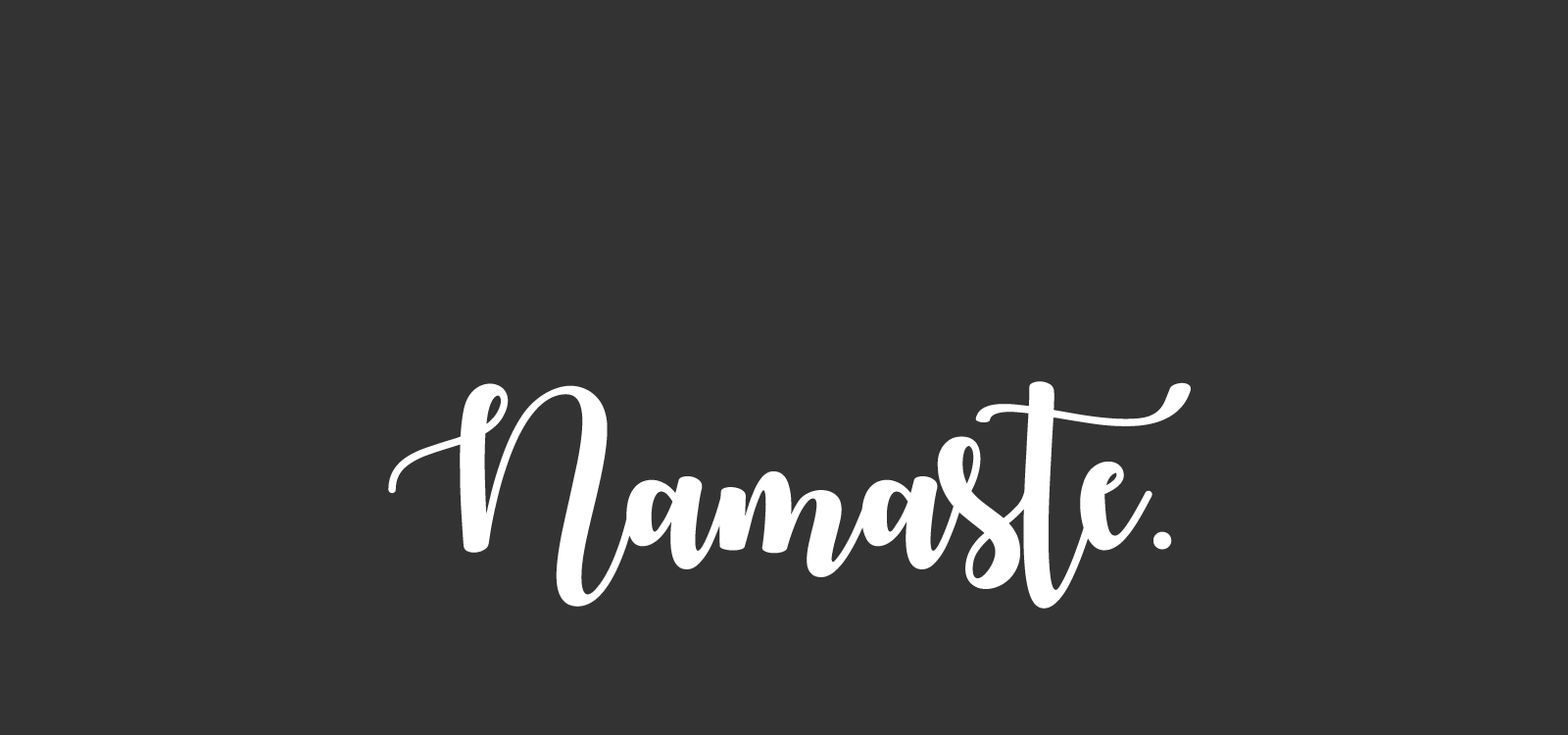
<style>
.page{position:relative;width:1568px;height:735px;background:#333333}
.page>*{position:absolute;margin:0}
.t1{font:176.4px "AutumninNovember";color:#ffffff}
</style>
<div class="page">
<p class="t1" style="left:388px;top:381px;width:803px;height:228px">Namaste.</p>
</div>
